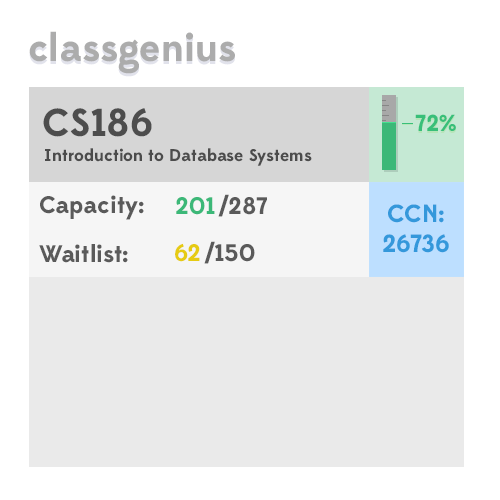
<style>
.page{position:relative;width:500px;height:500px;background:#eaeaea}
.page>*{position:absolute;margin:0}
.t1{font:39px "Edmondsans-Bold";color:#acacac}
.t2{font:39px "Edmondsans-Bold";color:#4c4c4c}
.t3{font:23.1px "Edmondsans-Bold";color:#38bf79}
.t4{font:17px "Edmondsans-Bold";color:#4c4c4c}
.t5{font:24px "Edmondsans-Bold";color:#5a5a5a}
.t6{font:24px "Edmondsans-Bold";color:#3cb878}
.t7{font:24.9px "Edmondsans-Bold";color:#3498db}
.t8{font:24px "Edmondsans-Bold";color:#e6cb13}
</style>
<div class="page">
<p class="t1" style="left:29px;top:31px;width:206px;height:43px">classgenius</p>
<p class="t2" style="left:43px;top:108px;width:109px;height:29px">CS186</p>
<p class="t3" style="left:415px;top:114px;width:41px;height:17px">72%</p>
<p class="t4" style="left:45px;top:148px;width:267px;height:18px">Introduction to Database Systems</p>
<p class="t5" style="left:40px;top:195px;width:104px;height:25px">Capacity:</p>
<p class="t6" style="left:176px;top:197px;width:39px;height:18px">201</p>
<p class="t5" style="left:218px;top:194px;width:49px;height:23px">/287</p>
<p class="t7" style="left:383px;top:204px;width:66px;height:49px;text-align:center">CCN:<br>26736</p>
<p class="t5" style="left:39px;top:244px;width:89px;height:19px">Waitlist:</p>
<p class="t8" style="left:175px;top:243px;width:25px;height:19px">62</p>
<p class="t5" style="left:204px;top:241px;width:51px;height:23px">/150</p>
</div>
